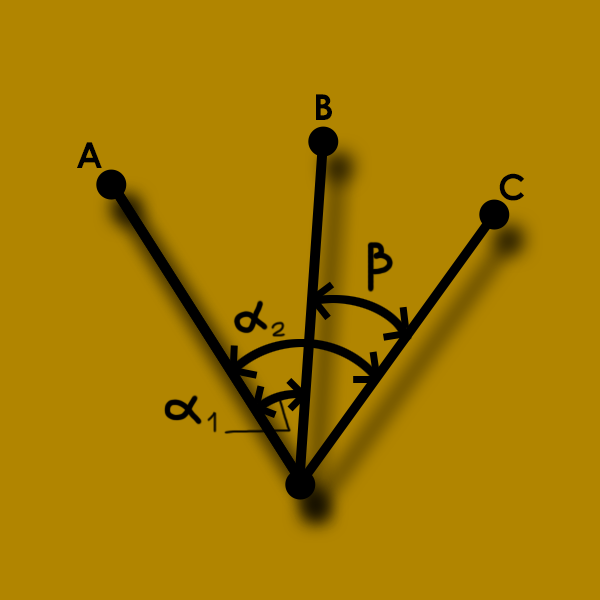
<style>
.page{position:relative;width:600px;height:600px;background:#b18500}
.page>*{position:absolute;margin:0}
.t1{font:35.9px "CenturyGothic-Bold";color:#000000}
</style>
<div class="page">
<p class="t1" style="left:316px;top:94px;width:16px;height:26px">B</p>
<p class="t1" style="left:77px;top:142px;width:25px;height:26px">A</p>
<p class="t1" style="left:499px;top:173px;width:26px;height:28px">C</p>
</div>
